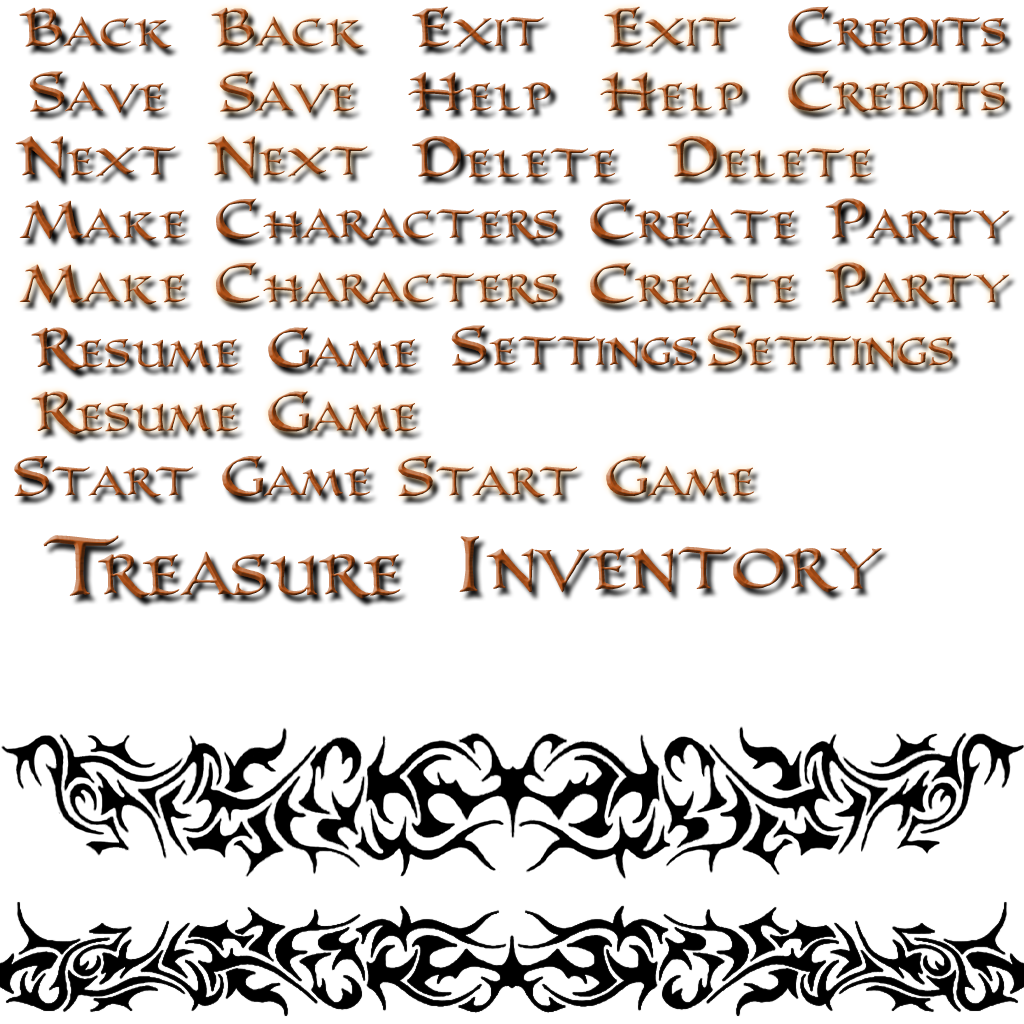
<style>
.page{position:relative;width:1024px;height:1024px;background:#ffffff}
.page>*{position:absolute;margin:0}
.t1{font:57.6px "PR-UncialAltCaps2";font-variant:small-caps;scale:0.83 1}
.t2{font:84.3px "PR-UncialAltCaps2";font-variant:small-caps;scale:0.8 1}
</style>
<div class="page">
<p class="t1" style="left:412px;top:6px;width:132px;height:42px">Exit</p>
<p class="t1" style="left:604px;top:6px;width:132px;height:42px">Exit</p>
<p class="t1" style="left:788px;top:6px;width:217px;height:42px">Credits</p>
<p class="t1" style="left:19px;top:7px;width:153px;height:42px">Back</p>
<p class="t1" style="left:211px;top:7px;width:153px;height:42px">Back</p>
<p class="t1" style="left:29px;top:71px;width:136px;height:42px">Save</p>
<p class="t1" style="left:219px;top:71px;width:136px;height:42px">Save</p>
<p class="t1" style="left:408px;top:72px;width:143px;height:39px">Help</p>
<p class="t1" style="left:600px;top:72px;width:143px;height:39px">Help</p>
<p class="t1" style="left:788px;top:70px;width:217px;height:42px">Credits</p>
<p class="t1" style="left:15px;top:136px;width:161px;height:43px">Next</p>
<p class="t1" style="left:207px;top:136px;width:161px;height:43px">Next</p>
<p class="t1" style="left:412px;top:136px;width:204px;height:42px">Delete</p>
<p class="t1" style="left:668px;top:136px;width:204px;height:42px">Delete</p>
<p class="t1" style="left:19px;top:198px;width:539px;height:43px">Make Characters</p>
<p class="t1" style="left:590px;top:198px;width:420px;height:43px">Create Party</p>
<p class="t1" style="left:19px;top:262px;width:539px;height:43px">Make Characters</p>
<p class="t1" style="left:590px;top:262px;width:420px;height:43px">Create Party</p>
<p class="t1" style="left:31px;top:327px;width:386px;height:44px">Resume Game</p>
<p class="t1" style="left:451px;top:325px;width:246px;height:43px">Settings</p>
<p class="t1" style="left:707px;top:325px;width:246px;height:43px">Settings</p>
<p class="t1" style="left:31px;top:391px;width:386px;height:44px">Resume Game</p>
<p class="t1" style="left:14px;top:455px;width:357px;height:43px">Start Game</p>
<p class="t1" style="left:398px;top:455px;width:357px;height:43px">Start Game</p>
<p class="t2" style="left:43px;top:535px;width:76px;height:61px">T</p>
<p class="t2" style="left:459px;top:536px;width:20px;height:56px">I</p>
<p class="t2" style="left:98px;top:551px;width:303px;height:48px">reasure</p>
<p class="t2" style="left:486px;top:546px;width:396px;height:47px">nventory</p>
</div>
